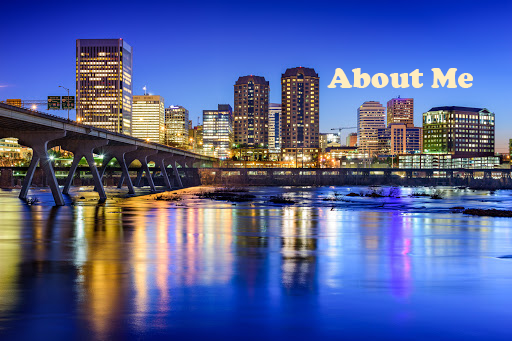
<style>
.page{position:relative;width:512px;height:341px}
.page>*{position:absolute;margin:0}
.t1{font:30px "CooperBlack";color:#ffedbf}
</style>
<div class="page">
<p class="t1" style="left:327px;top:68px;width:146px;height:20px">About Me</p>
</div>
